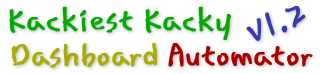
<style>
.page{position:relative;width:320px;height:74px;background:#ffffff}
.page>*{position:absolute;margin:0}
.t1{font:30px "KCCImkwontaek";letter-spacing:0.026em;color:#00aa00;font-weight:bold}
.t2{font:36px "KCCImkwontaek";letter-spacing:0.026em;color:#3939b2;font-weight:bold}
.t3{font:30px "KCCImkwontaek";color:#aaaa00;font-weight:bold}
.t4{font:30px "KCCImkwontaek";color:#aa0000;font-weight:bold}
</style>
<div class="page">
<p class="t1" style="left:9px;top:6px;width:222px;height:34px">Kackiest Kacky</p>
<p class="t2" style="left:246px;top:6px;width:60px;height:35px;rotate:-19deg">v1.2</p>
<p class="t3" style="left:11px;top:43px;width:302px;height:25px">Dashboard <span class="t4">Automator</span></p>
</div>
